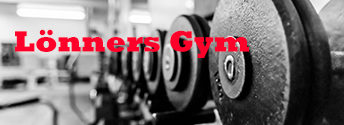
<style>
.page{position:relative;width:344px;height:125px}
.page>*{position:absolute;margin:0}
.t1{font:30px "Rockwell-ExtraBold";color:#ff002a}
</style>
<div class="page">
<p class="t1" style="left:15px;top:29px;width:234px;height:29px">Lönners Gym</p>
</div>
